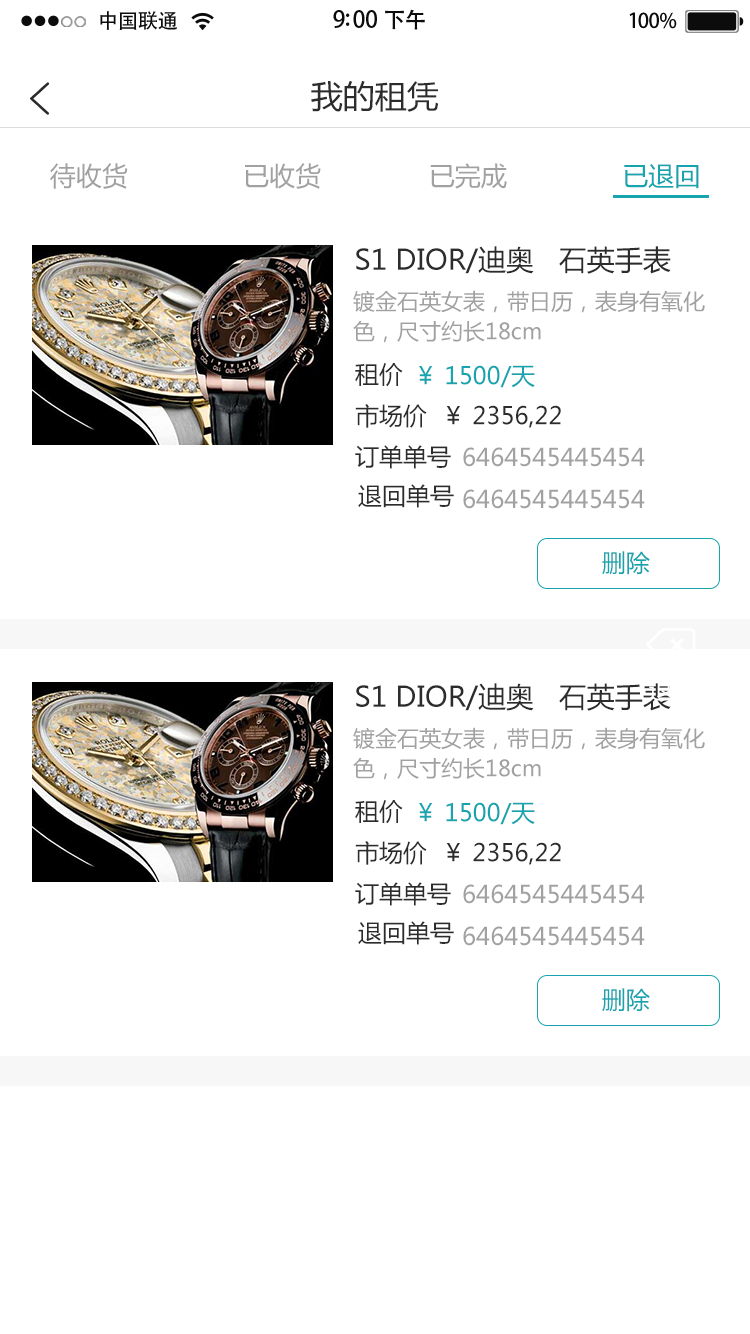
<style>
.page{position:relative;width:750px;height:1334px;background:#ffffff}
.page>*{position:absolute;margin:0}
.t1{font:20.4px "AdobeHeitiStd-Regular";letter-spacing:-0.02em;color:#000000}
.t2{font:23px "AdobeHeitiStd-Regular";letter-spacing:-0.02em;color:#000000}
.t3{font:22px "AdobeHeitiStd-Regular";letter-spacing:-0.02em;color:#000000}
.t4{font:20.4px "AdobeHeitiStd-Regular";letter-spacing:-0.02em;color:#010101}
.t5{font:32px "MicrosoftYaHei";color:#2c2c2c}
.t6{font:26px "MicrosoftYaHei";color:#a1a1a1}
.t7{font:26px "MicrosoftYaHei";color:#2c2c2c}
.t8{font:26px "MicrosoftYaHei";color:#16a4ae}
.t9{font:28px "MicrosoftYaHei";color:#2c2c2c}
.t10{font:22px/15px "MicrosoftYaHei";color:#a1a1a1}
.t11{font:24px "MicrosoftYaHei";color:#2c2c2c}
.t12{font:24px "MicrosoftYaHei";color:#16a4ae}
.t13{font:24px "MicrosoftYaHei";color:#a1a1a1}
</style>
<div class="page">
<p class="t1" style="left:100px;top:11px;width:77px;height:19px">中国联通</p>
<p class="t2" style="left:333px;top:9px;width:92px;height:21px">9:00 <span class="t3">下午</span></p>
<p class="t4" style="left:629px;top:12px;width:48px;height:17px">100%</p>
<p class="t5" style="left:311px;top:81px;width:127px;height:31px">我的租凭</p>
<p class="t6" style="left:50px;top:163px;width:649px;height:26px"><span class="t7"> </span>待收货               已收货              已完成               <span class="t8">已退回</span></p>
<p class="t9" style="left:356px;top:246px;width:315px;height:28px">S1 DIOR/迪奥   石英手表</p>
<p class="t10" style="left:353px;top:290px;width:352px;height:53px">镀金石英女表，带日历，表身有氧化<br><br>色，尺寸约长18cm</p>
<p class="t11" style="left:355px;top:363px;width:48px;height:24px">租价</p>
<p class="t12" style="left:419px;top:365px;width:116px;height:23px">￥ 1500/天</p>
<p class="t11" style="left:355px;top:404px;width:206px;height:24px">市场价  ￥ 2356,22</p>
<p class="t11" style="left:355px;top:445px;width:96px;height:24px">订单单号</p>
<p class="t13" style="left:463px;top:447px;width:182px;height:20px">6464545445454</p>
<p class="t11" style="left:358px;top:484px;width:96px;height:24px">退回单号</p>
<p class="t13" style="left:463px;top:489px;width:182px;height:20px">6464545445454</p>
<p class="t12" style="left:602px;top:551px;width:48px;height:24px">删除</p>
<p class="t9" style="left:356px;top:683px;width:315px;height:28px">S1 DIOR/迪奥   石英手表</p>
<p class="t10" style="left:353px;top:727px;width:352px;height:53px">镀金石英女表，带日历，表身有氧化<br><br>色，尺寸约长18cm</p>
<p class="t11" style="left:355px;top:800px;width:48px;height:24px">租价</p>
<p class="t12" style="left:419px;top:802px;width:116px;height:23px">￥ 1500/天</p>
<p class="t11" style="left:355px;top:841px;width:206px;height:24px">市场价  ￥ 2356,22</p>
<p class="t11" style="left:355px;top:882px;width:96px;height:24px">订单单号</p>
<p class="t13" style="left:463px;top:884px;width:182px;height:20px">6464545445454</p>
<p class="t11" style="left:358px;top:921px;width:96px;height:24px">退回单号</p>
<p class="t13" style="left:463px;top:926px;width:182px;height:20px">6464545445454</p>
<p class="t12" style="left:602px;top:988px;width:48px;height:24px">删除</p>
</div>
